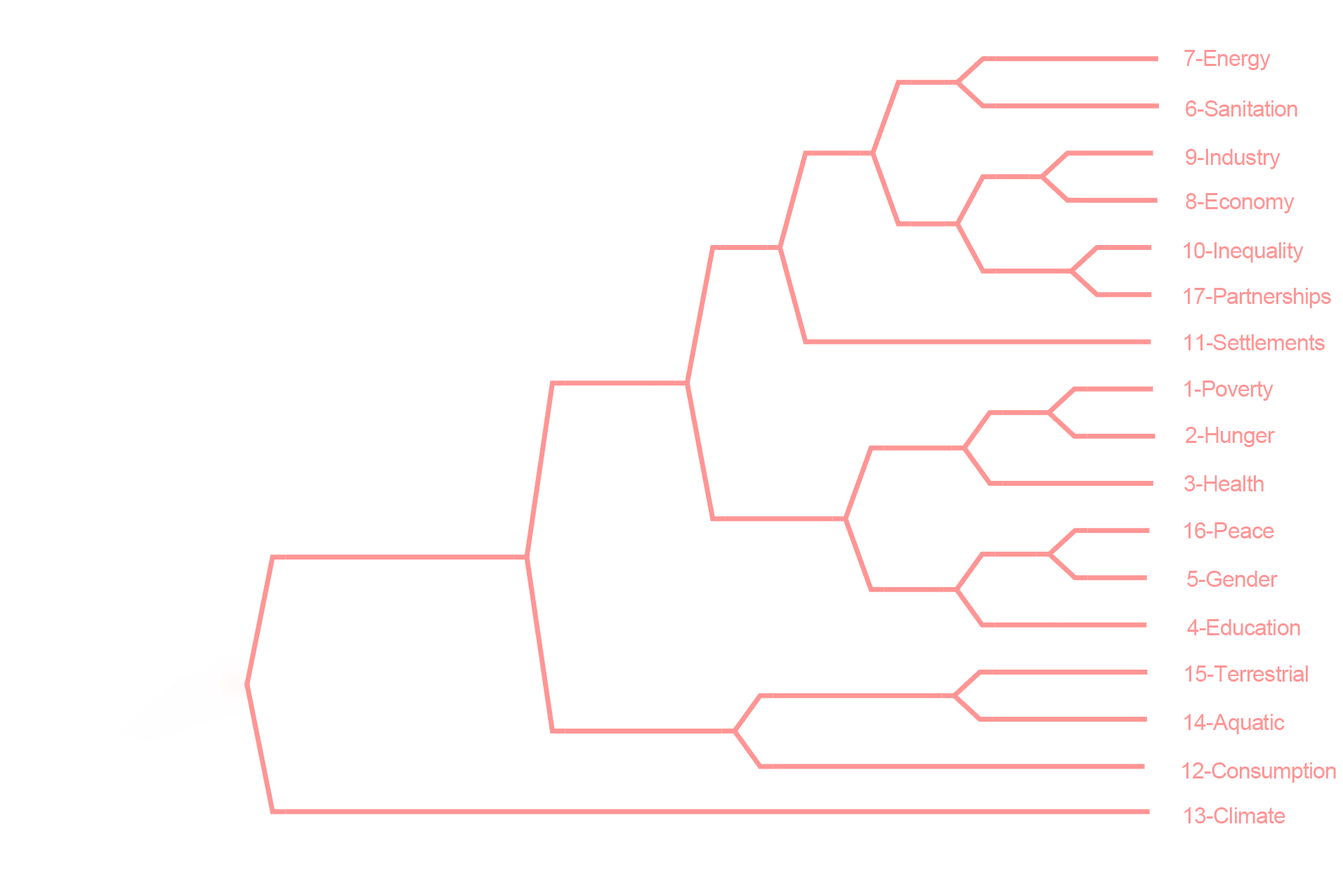
<style>
.page{position:relative;width:1343px;height:888px;background:#ffffff}
.page>*{position:absolute;margin:0}
.t1{font:22.5px "ArialMT";letter-spacing:-0.025em;color:#ff9595}
</style>
<div class="page">
<p class="t1" style="left:1184px;top:50px;width:86px;height:20px">7-Energy</p>
<p class="t1" style="left:1185px;top:100px;width:112px;height:17px">6-Sanitation</p>
<p class="t1" style="left:1185px;top:149px;width:95px;height:20px">9-Industry</p>
<p class="t1" style="left:1185px;top:193px;width:109px;height:20px">8-Economy</p>
<p class="t1" style="left:1183px;top:242px;width:120px;height:21px">10-Inequality</p>
<p class="t1" style="left:1183px;top:288px;width:148px;height:20px">17-Partnerships</p>
<p class="t1" style="left:1184px;top:334px;width:140px;height:16px">11-Settlements</p>
<p class="t1" style="left:1184px;top:381px;width:89px;height:20px">1-Poverty</p>
<p class="t1" style="left:1185px;top:427px;width:89px;height:20px">2-Hunger</p>
<p class="t1" style="left:1184px;top:475px;width:79px;height:17px">3-Health</p>
<p class="t1" style="left:1184px;top:522px;width:90px;height:17px">16-Peace</p>
<p class="t1" style="left:1187px;top:571px;width:90px;height:16px">5-Gender</p>
<p class="t1" style="left:1187px;top:619px;width:113px;height:16px">4-Education</p>
<p class="t1" style="left:1185px;top:666px;width:122px;height:16px">15-Terrestrial</p>
<p class="t1" style="left:1184px;top:714px;width:100px;height:20px">14-Aquatic</p>
<p class="t1" style="left:1182px;top:763px;width:153px;height:20px">12-Consumption</p>
<p class="t1" style="left:1184px;top:807px;width:101px;height:17px">13-Climate</p>
</div>
